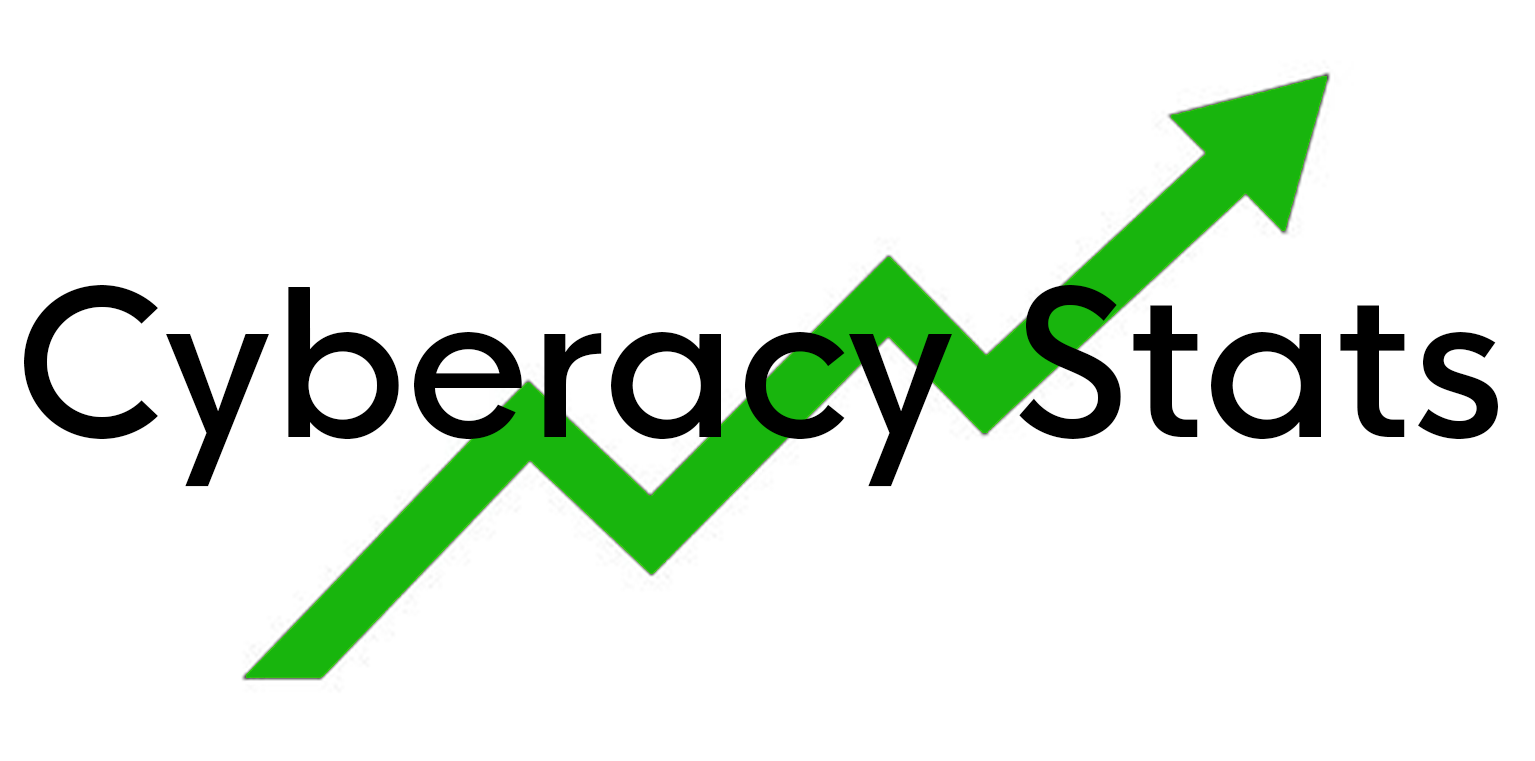
<style>
.page{position:relative;width:1535px;height:761px;background:#ffffff}
.page>*{position:absolute;margin:0}
.t1{font:200px "HKNova-Medium";color:#000000}
</style>
<div class="page">
<p class="t1" style="left:24px;top:285px;width:1474px;height:202px">Cyberacy Stats</p>
</div>
